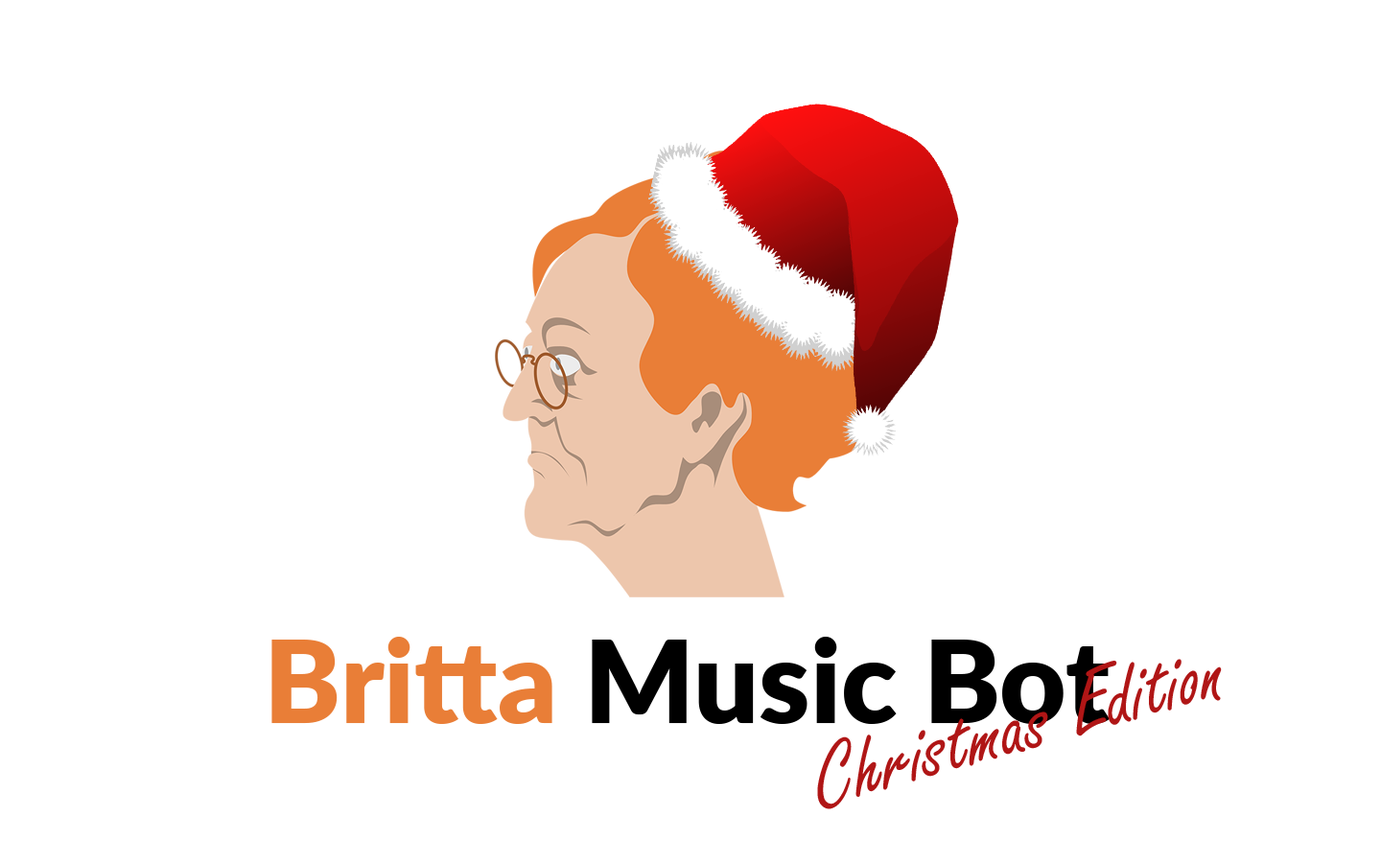
<style>
.page{position:relative;width:1381px;height:863px;background:#ffffff}
.page>*{position:absolute;margin:0}
.t1{font:115.1px "Lato-Black";color:#000000}
.t2{font:115.1px "Lato-Black";color:#e97e37}
.t3{font:95.9px "FreestyleScript-Regular";color:#b01616}
</style>
<div class="page">
<p class="t1" style="left:271px;top:637px;width:839px;height:87px"><span class="t2">Britta </span>Music Bot</p>
<p class="t3" style="left:817px;top:659px;width:405px;height:151px;rotate:-16deg">Christmas Edition</p>
</div>
